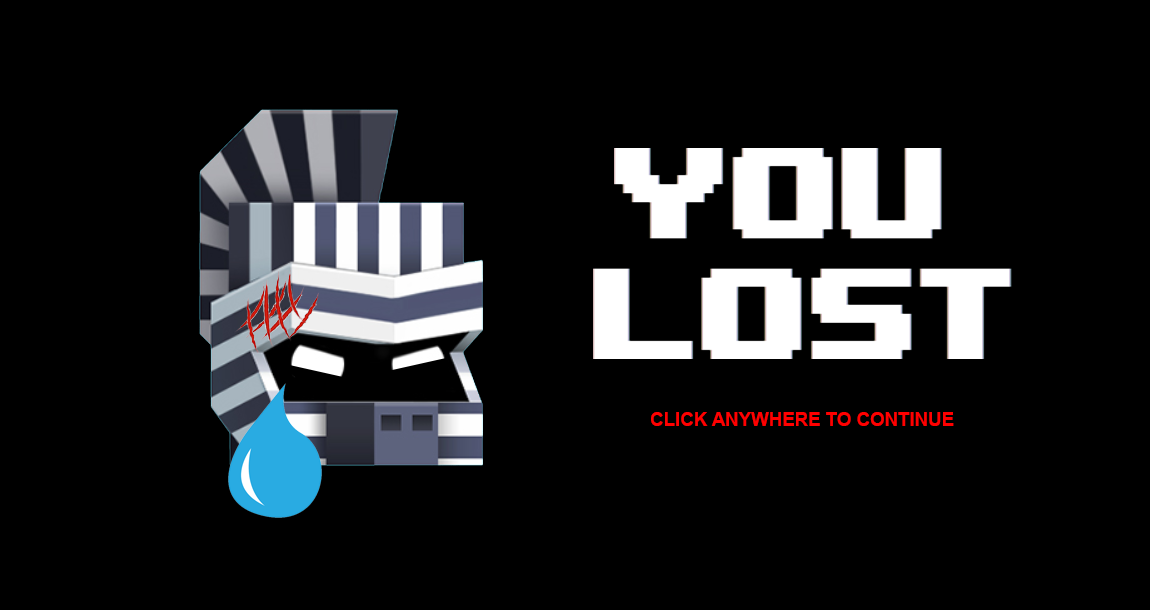
<style>
.page{position:relative;width:1150px;height:610px;background:#000000}
.page>*{position:absolute;margin:0}
.t1{font:18.7px "Arial-BoldMT";color:#fe0000}
</style>
<div class="page">
<p class="t1" style="left:651px;top:412px;width:303px;height:14px">CLICK ANYWHERE TO CONTINUE</p>
</div>
